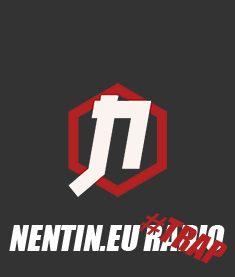
<style>
.page{position:relative;width:235px;height:277px;background:#333333}
.page>*{position:absolute;margin:0}
.t1{font:32.6px "Impact";color:#b42121;text-transform:uppercase;font-style:italic}
.t2{font:32.6px "Impact";color:#ffffff;text-transform:uppercase;font-style:italic}
</style>
<div class="page">
<p class="t1" style="left:138px;top:213px;width:89px;height:51px;rotate:26deg">#TRAP</p>
<p class="t2" style="left:9px;top:225px;width:216px;height:26px">NENTIN.EU RADIO</p>
</div>
